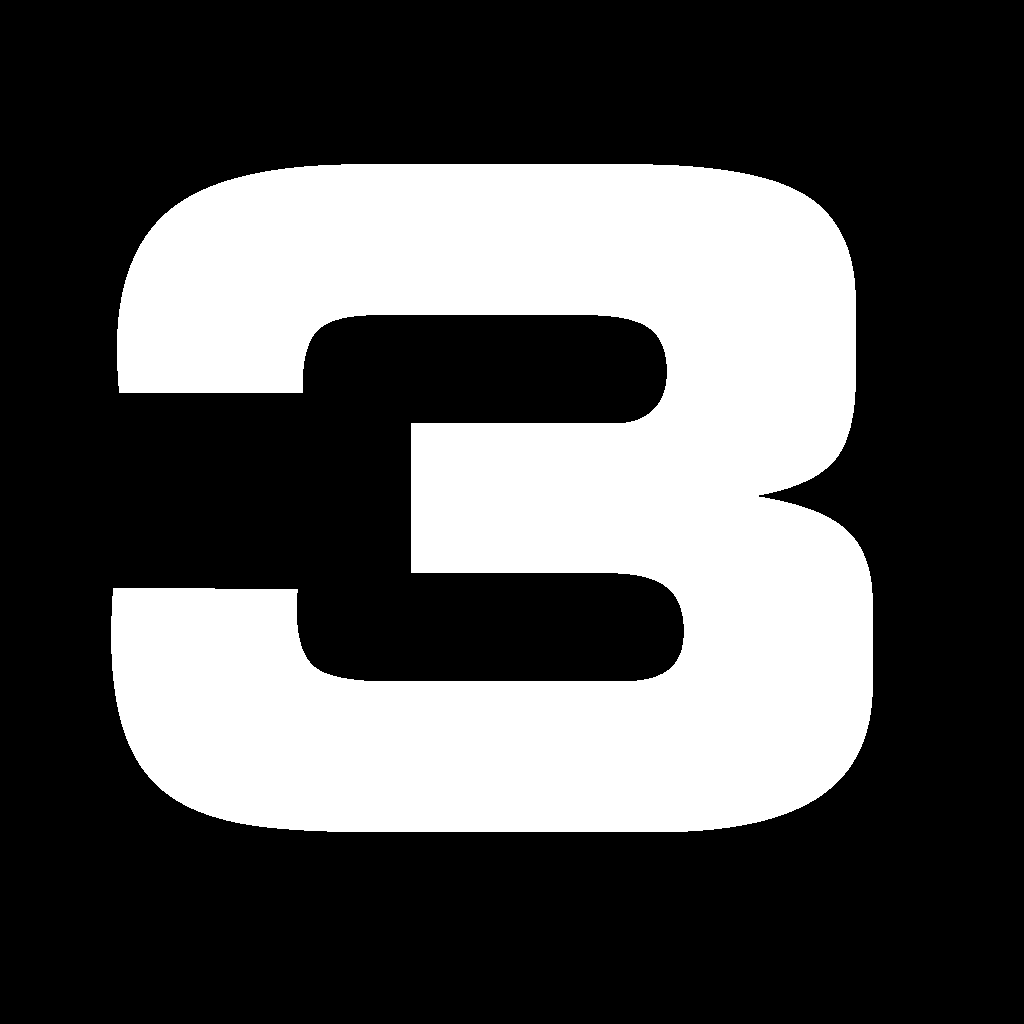
<style>
.page{position:relative;width:1024px;height:1024px;background:#000000}
.page>*{position:absolute;margin:0}
.t1{font:895.8px "Square721BT-BoldExtended";color:#ffffff}
</style>
<div class="page">
<p class="t1" style="left:111px;top:164px;width:762px;height:668px">3</p>
</div>
